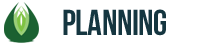
<style>
.page{position:relative;width:202px;height:45px;background:#ffffff}
.page>*{position:absolute;margin:0}
.t1{font:36px "BebasNeue";letter-spacing:-0.01em;color:#153640}
</style>
<div class="page">
<p class="t1" style="left:63px;top:9px;width:103px;height:27px">PLANNING</p>
</div>
